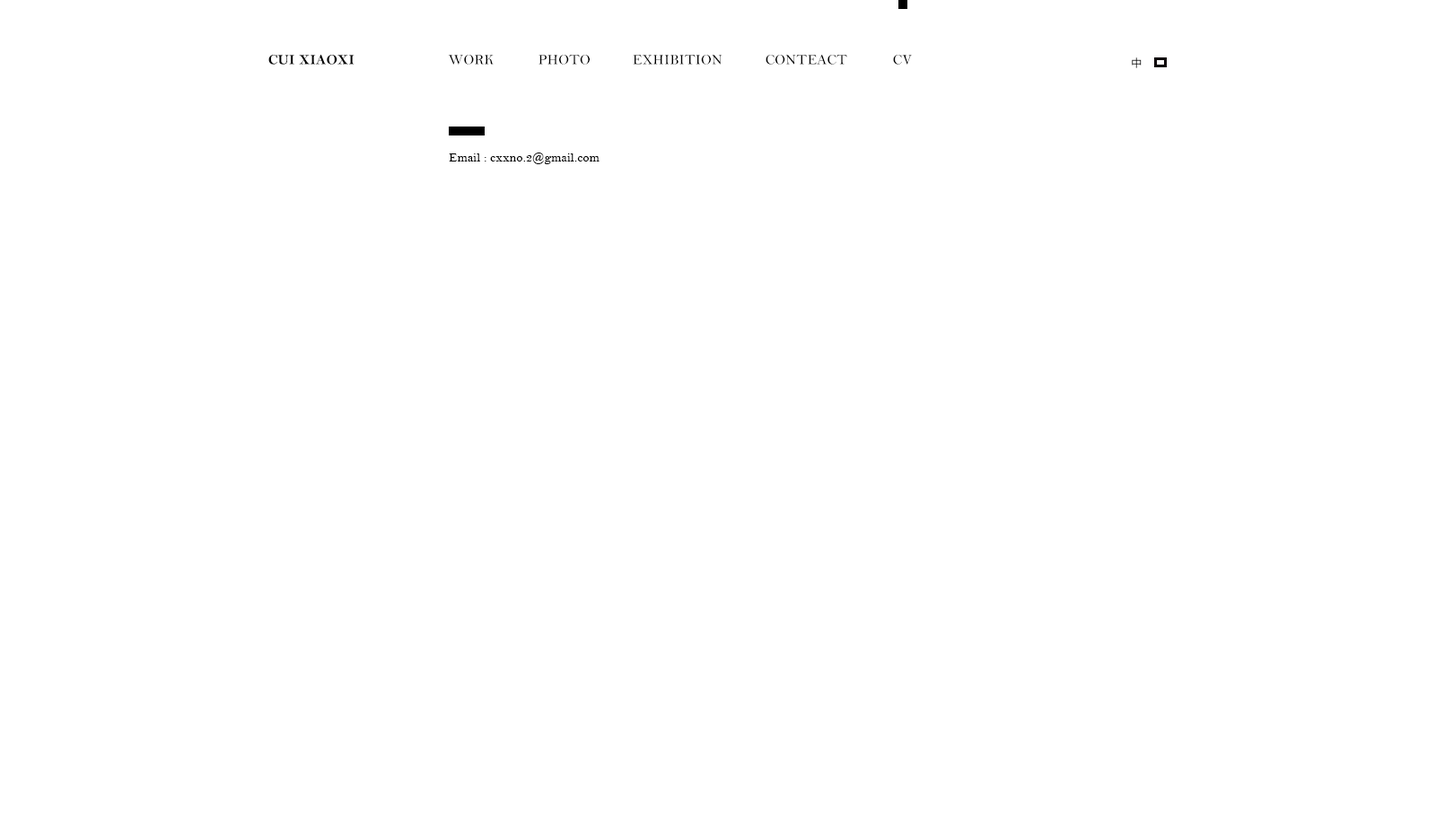
<style>
.page{position:relative;width:1436px;height:830px;background:#ffffff}
.page>*{position:absolute;margin:0}
.t1{font:14.4px "BellMTBold";letter-spacing:0.02em;color:#000000;text-transform:uppercase}
.t2{font:14.4px "BellMT";letter-spacing:0.02em;color:#000000;text-transform:uppercase}
.t3{font:10.8px "MicrosoftYaHei";letter-spacing:0.02em;text-transform:uppercase}
.t4{font:12.6px "BellMT";letter-spacing:0.02em;color:#000000}
.t5{font:14.4px "BellMT";letter-spacing:0.02em;color:#000000}
</style>
<div class="page">
<p class="t1" style="left:268px;top:55px;width:87px;height:10px">cui xiaoxi</p>
<p class="t2" style="left:448px;top:55px;width:46px;height:10px">work</p>
<p class="t2" style="left:539px;top:55px;width:51px;height:10px">photo</p>
<p class="t2" style="left:633px;top:55px;width:90px;height:10px">exhibition</p>
<p class="t2" style="left:766px;top:55px;width:81px;height:10px">conteact</p>
<p class="t2" style="left:893px;top:55px;width:19px;height:10px">cv</p>
<p class="t3" style="left:1132px;top:57px;width:10px;height:11px">中</p>
<p class="t4" style="left:449px;top:153px;width:151px;height:11px"><span class="t5"><br></span>Email : cxxno.2@gmail.com</p>
</div>
